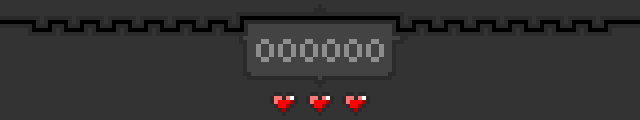
<style>
.page{position:relative;width:640px;height:120px;background:#333333}
.page>*{position:absolute;margin:0}
.t1{font:36px "04b03";color:#8e8e8e}
</style>
<div class="page">
<p class="t1" style="left:256px;top:39px;width:128px;height:23px">000000</p>
</div>
